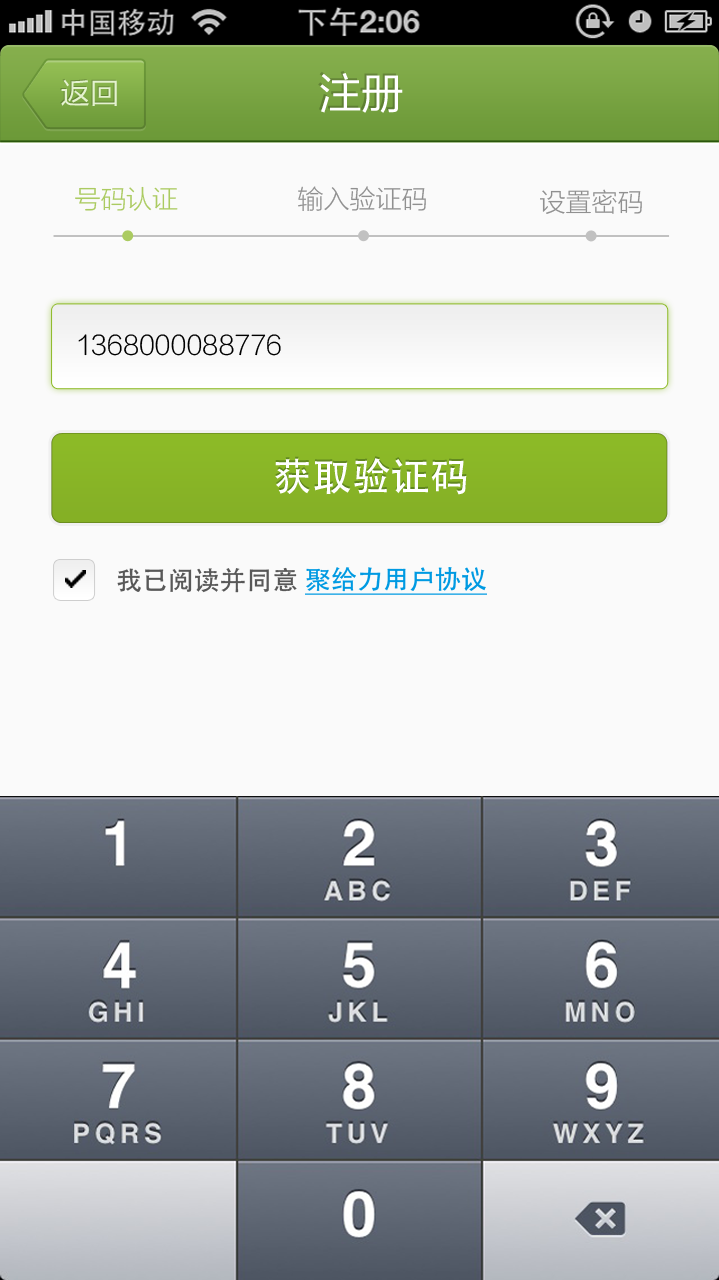
<style>
.page{position:relative;width:719px;height:1280px;background:#fafafa}
.page>*{position:absolute;margin:0}
.t1{font:42.7px "FZLTHJW--GB1-0";color:#ffffff}
.t2{font:29.2px "FZLTHJW--GB1-0";color:#dddddd}
.t3{font:26px "FZLTXHJW--GB1-0";color:#abcb61}
.t4{font:26px "FZLTXHJW--GB1-0";color:#909090}
.t5{font:26px "FZLTXHJW--GB1-0";color:#000000}
.t6{font:38.5px "AdobeHeitiStd-Regular";color:#ffffff}
.t7{font:26px "AdobeHeitiStd-Regular";color:#585858}
.t8{font:26px "AdobeHeitiStd-Regular";color:#009ae2;text-decoration:underline}
</style>
<div class="page">
<p class="t1" style="left:320px;top:73px;width:83px;height:40px">注册</p>
<p class="t2" style="left:61px;top:79px;width:56px;height:27px">返回</p>
<p class="t3" style="left:75px;top:186px;width:103px;height:25px">号码认证</p>
<p class="t4" style="left:298px;top:186px;width:128px;height:25px">输入验证码</p>
<p class="t4" style="left:540px;top:189px;width:102px;height:25px">设置密码</p>
<p class="t5" style="left:78px;top:334px;width:203px;height:22px">1368000088776</p>
<p class="t6" style="left:275px;top:458px;width:192px;height:37px">获取验证码</p>
<p class="t7" style="left:117px;top:567px;width:180px;height:26px">我已阅读并同意</p>
<p class="t8" style="left:305px;top:567px;width:182px;height:28px">聚给力用户协议</p>
</div>
